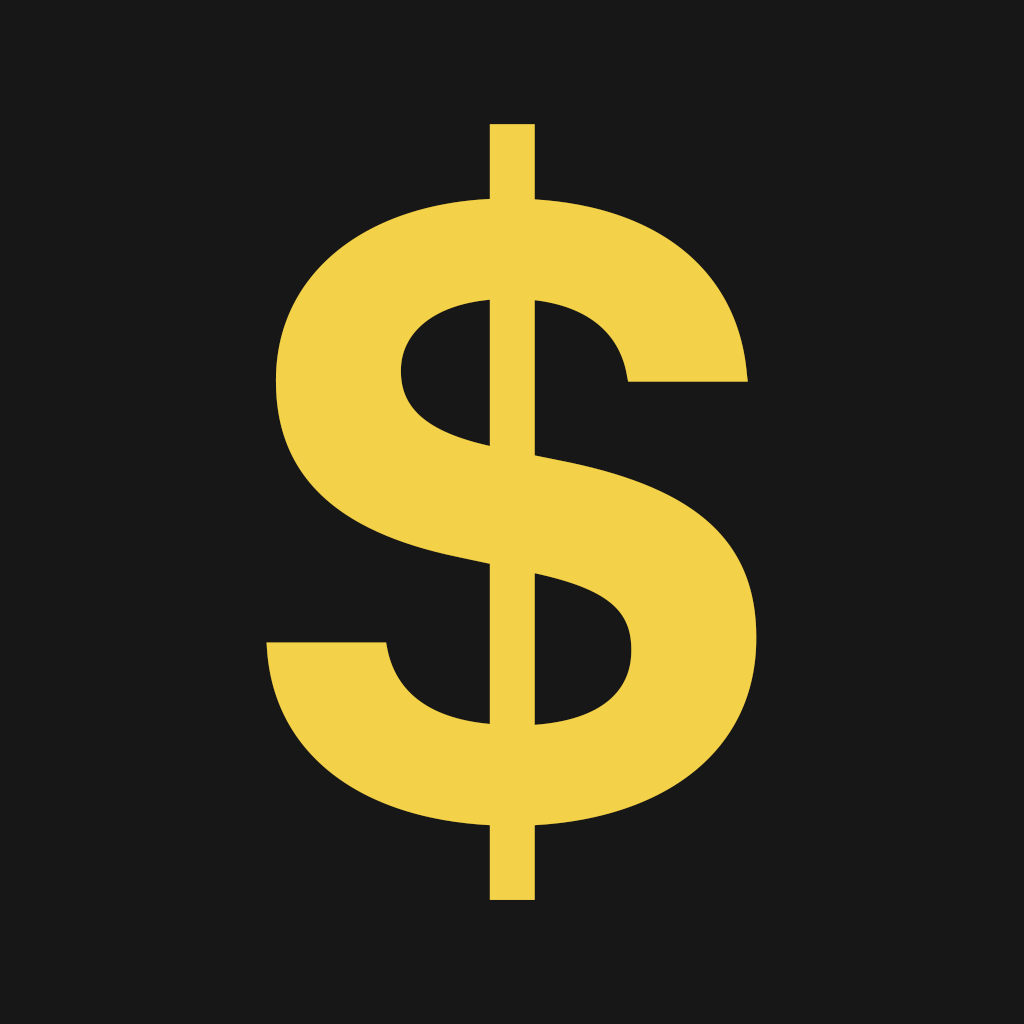
<style>
.page{position:relative;width:1024px;height:1024px;background:#171717}
.page>*{position:absolute;margin:0}
.t1{font:916.7px "SFProDisplay-Bold";color:#f3d149}
</style>
<div class="page">
<p class="t1" style="left:266px;top:124px;width:491px;height:776px">$</p>
</div>
